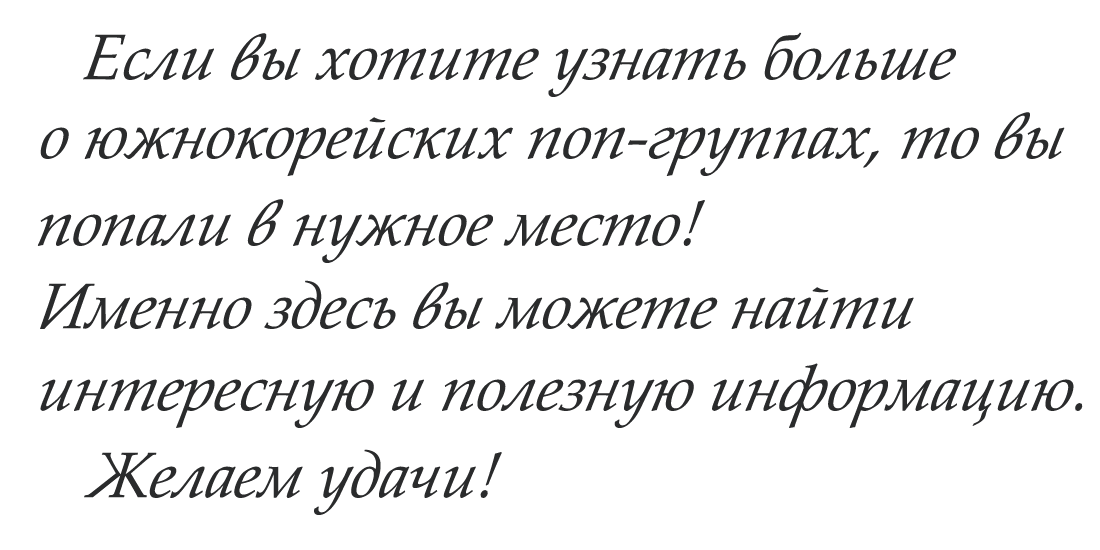
<style>
.page{position:relative;width:1100px;height:550px;background:#ffffff}
.page>*{position:absolute;margin:0}
.t1{font:64px "BookAntiqua-Italic";color:#2a2b2c;font-style:italic}
</style>
<div class="page">
<p class="t1" style="left:83px;top:32px;width:873px;height:65px">Если вы хотите узнать больше</p>
<p class="t1" style="left:40px;top:112px;width:1025px;height:64px">о южнокорейских поп-группах, то вы</p>
<p class="t1" style="left:37px;top:199px;width:668px;height:64px">попали в нужное место!</p>
<p class="t1" style="left:40px;top:280px;width:874px;height:49px">Именно здесь вы можете найти</p>
<p class="t1" style="left:40px;top:363px;width:1043px;height:65px">интересную и полезную информацию.</p>
<p class="t1" style="left:84px;top:449px;width:418px;height:66px">Желаем удачи!</p>
</div>
